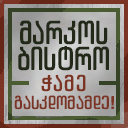
<style>
.page{position:relative;width:128px;height:128px}
.page>*{position:absolute;margin:0}
.t1{font:33.3px/26px "ArchyEDT-Bold";color:#222918;scale:0.9 1}
.t2{font:23px "ArchyEDT-Bold";letter-spacing:0.06em;color:#7c3525}
.t3{font:19px "ArchyEDT-Bold";color:#7c3525}
</style>
<div class="page">
<p class="t1" style="left:18px;top:20px;width:91px;height:51px;text-align:center">მარკოს<br>ბისტრო</p>
<p class="t2" style="left:41px;top:74px;width:45px;height:18px">ჭამე</p>
<p class="t3" style="left:14px;top:95px;width:100px;height:15px">გასკდომამდე!</p>
</div>
